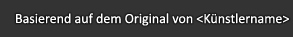
<style>
.page{position:relative;width:293px;height:37px;background:#333333}
.page>*{position:absolute;margin:0}
.t1{font:14px "Calibri";color:#ffffff}
</style>
<div class="page">
<p class="t1" style="left:16px;top:13px;width:273px;height:13px">Basierend auf dem Original von &lt;Künstlername&gt;</p>
</div>
